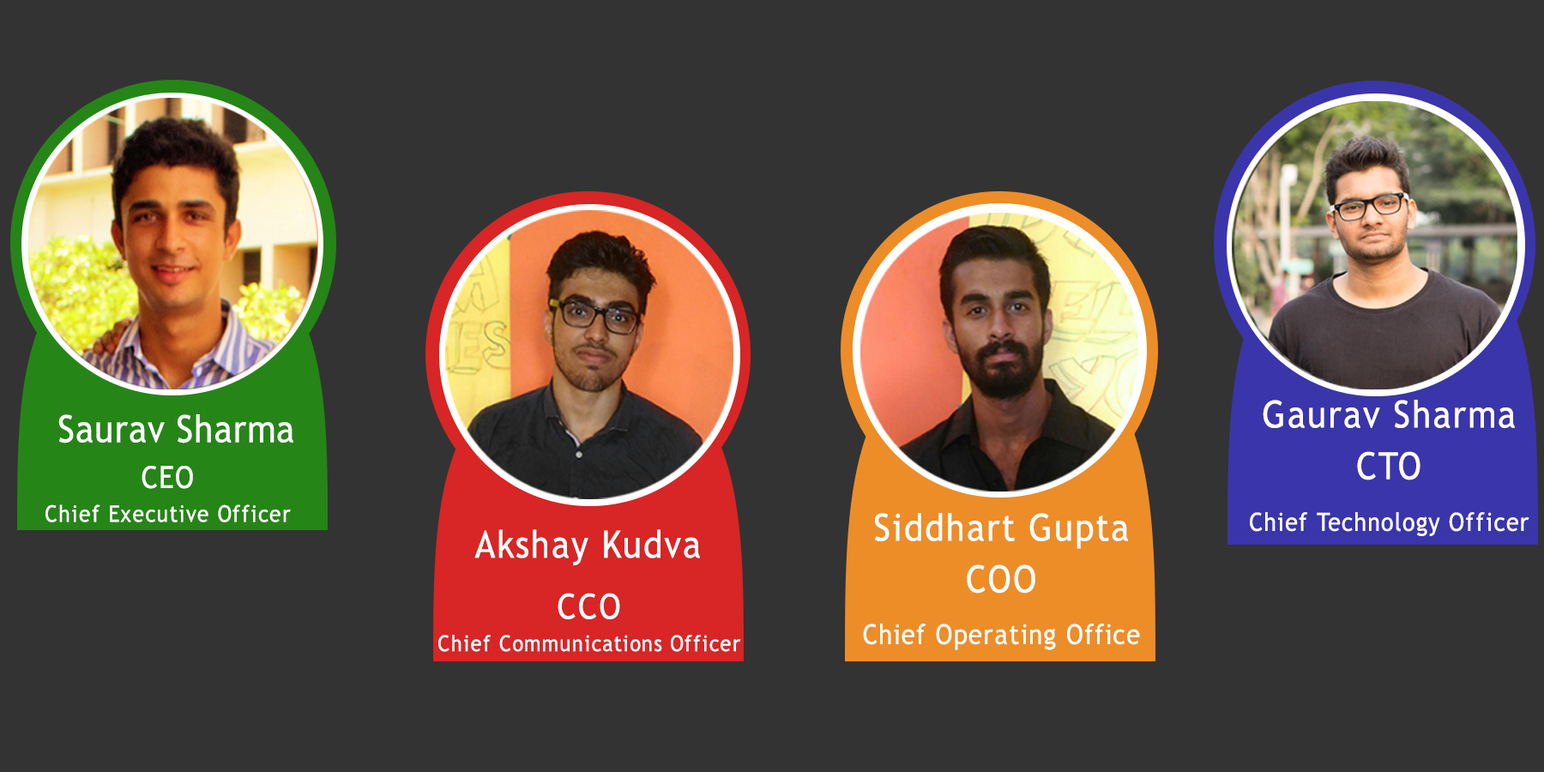
<style>
.page{position:relative;width:1544px;height:772px;background:#333333}
.page>*{position:absolute;margin:0}
.t1{font:25.2px/51.7px "TrebuchetMS";letter-spacing:0.05em;color:#ffffff;scale:0.92 1}
.t2{font:37.6px/51.7px "TrebuchetMS";letter-spacing:0.05em;color:#ffffff;scale:0.92 1}
.t3{font:37.6px "TrebuchetMS";letter-spacing:0.025em;color:#ffffff;scale:0.92 1}
.t4{font:22.9px/33.8px "TrebuchetMS";letter-spacing:0.05em;color:#ffffff;scale:0.92 1}
.t5{font:30.5px/33.8px "TrebuchetMS";letter-spacing:0.05em;color:#ffffff;scale:0.92 1}
.t6{font:27.4px/51.7px "TrebuchetMS";letter-spacing:0.05em;color:#ffffff;scale:0.92 1}
.t7{font:37.6px "TrebuchetMS";letter-spacing:0.05em;color:#ffffff;scale:0.92 1}
.t8{font:21.9px/32.4px "TrebuchetMS";letter-spacing:0.05em;color:#ffffff;scale:0.93 1}
.t9{font:34.8px/32.4px "TrebuchetMS";letter-spacing:0.05em;color:#ffffff;scale:0.93 1}
</style>
<div class="page">
<p class="t1" style="left:1250px;top:400px;width:280px;height:136px;text-align:center"><span class="t2">Gaurav Sharma<br>CTO<br></span>Chief Technology Officer</p>
<p class="t3" style="left:58px;top:414px;width:235px;height:30px">Saurav Sharma</p>
<p class="t4" style="left:45px;top:466px;width:246px;height:56px;text-align:center"><span class="t5">CEO<br></span>Chief Executive Officer</p>
<p class="t6" style="left:863px;top:513px;width:277px;height:137px;text-align:center"><span class="t2">Siddhart Gupta<br>COO<br></span>Chief Operating Office</p>
<p class="t7" style="left:474px;top:529px;width:226px;height:37px">Akshay Kudva</p>
<p class="t8" style="left:438px;top:593px;width:303px;height:59px;text-align:center"><span class="t9">CCO<br></span>Chief Communications Officer</p>
</div>
